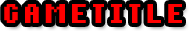
<style>
.page{position:relative;width:189px;height:31px;background:#000000}
.page>*{position:absolute;margin:0}
.t1{font:43px "Notalot35";letter-spacing:0.11em;color:#ff0000;text-transform:uppercase}
</style>
<div class="page">
<p class="t1" style="left:4px;top:4px;width:178px;height:19px">GAMETITLE</p>
</div>
